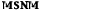
<style>
.page{position:relative;width:85px;height:11px;background:#ffffff}
.page>*{position:absolute;margin:0}
.t1{font:10px "Mest";letter-spacing:0.05em;color:#000000}
</style>
<div class="page">
<p class="t1" style="left:2px;top:1px;width:37px;height:9px">msnm</p>
</div>
